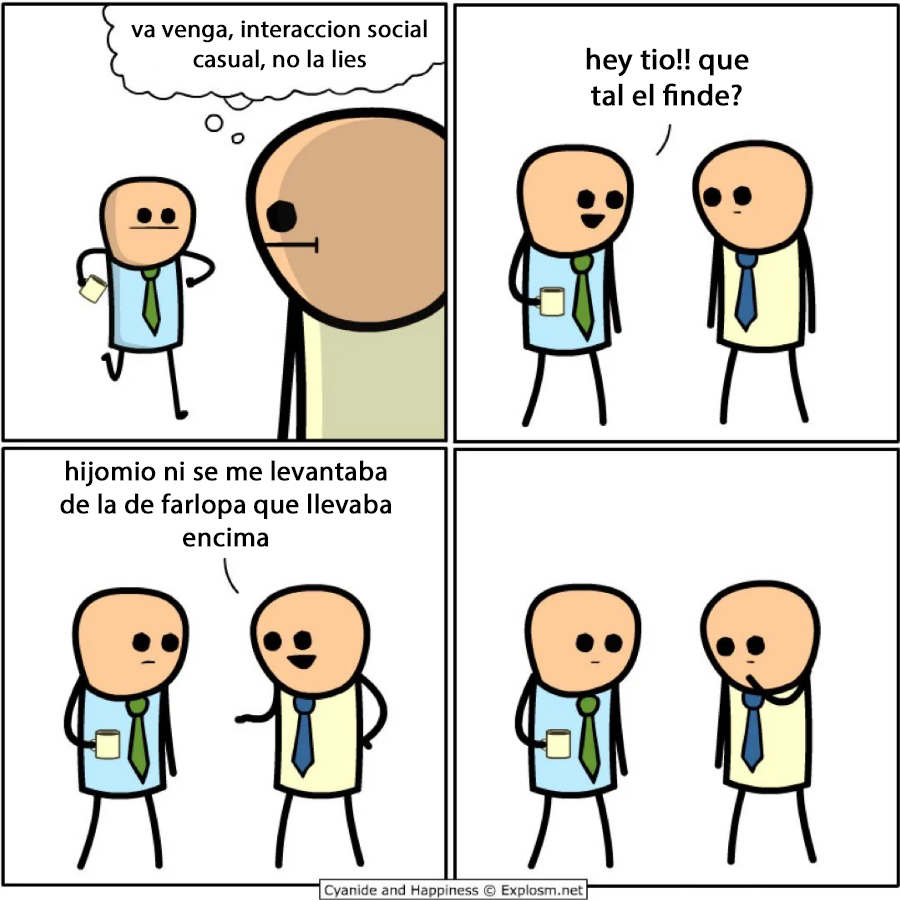
<style>
.page{position:relative;width:900px;height:900px;background:#ffffff}
.page>*{position:absolute;margin:0}
.t1{font:24.6px "MyriadPro-Regular";color:#000000;font-weight:bold}
.t2{font:30px "MyriadPro-Regular";color:#000000;font-weight:bold}
.t3{font:27.3px "MyriadPro-Regular";color:#000000;font-weight:bold}
</style>
<div class="page">
<p class="t1" style="left:131px;top:19px;width:296px;height:52px;text-align:center">va venga, interaccion social<br>casual, no la lies</p>
<p class="t2" style="left:586px;top:47px;width:163px;height:59px;text-align:center">hey tio!! que<br>tal el finde?</p>
<p class="t3" style="left:60px;top:460px;width:332px;height:87px;text-align:center">hijomio ni se me levantaba<br>de la de farlopa que llevaba<br>encima</p>
</div>
